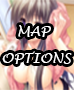
<style>
.page{position:relative;width:74px;height:90px}
.page>*{position:absolute;margin:0}
.t1{font:13.9px "LucidaHandwriting-Italic";color:#ffffff}
</style>
<div class="page">
<p class="t1" style="left:18px;top:25px;width:33px;height:12px">MAP</p>
<p class="t1" style="left:2px;top:51px;width:70px;height:13px">OPTIONS</p>
</div>
